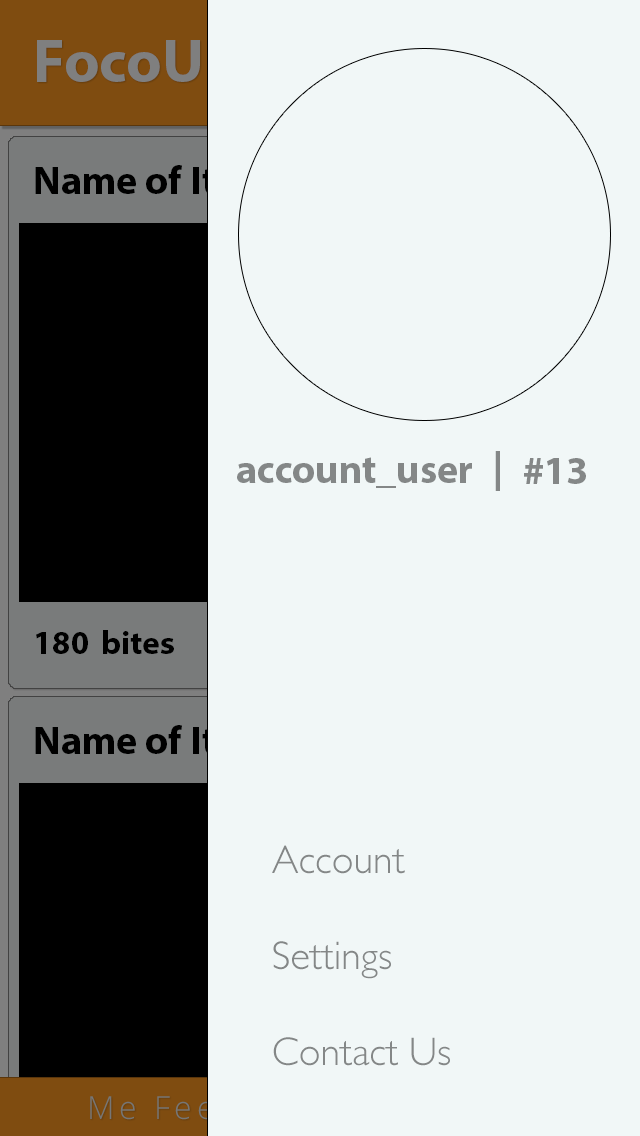
<style>
.page{position:relative;width:640px;height:1136px;background:#f1f7f7}
.page>*{position:absolute;margin:0}
.t1{font:40px "MyriadHebrew-Bold";color:#000000}
.t2{font:40px "MyriadHebrew-Bold";color:#848787}
.t3{font:33.2px "MyriadHebrew-Bold";color:#000000}
.t4{font:40px "GillSans-Light";color:#848787}
</style>
<div class="page">
<p class="t1" style="left:35px;top:165px;width:234px;height:29px">Name of Item</p>
<p class="t2" style="left:237px;top:457px;width:235px;height:31px">account_user</p>
<p class="t2" style="left:495px;top:451px;width:5px;height:40px">|</p>
<p class="t2" style="left:524px;top:458px;width:62px;height:26px">#13</p>
<p class="t3" style="left:103px;top:630px;width:71px;height:24px">bites</p>
<p class="t3" style="left:36px;top:632px;width:52px;height:22px">180</p>
<p class="t1" style="left:35px;top:725px;width:234px;height:29px">Name of Item</p>
<p class="t4" style="left:272px;top:845px;width:178px;height:221px;text-align:right">Account<br><br>Settings<br><br>Contact Us</p>
</div>
